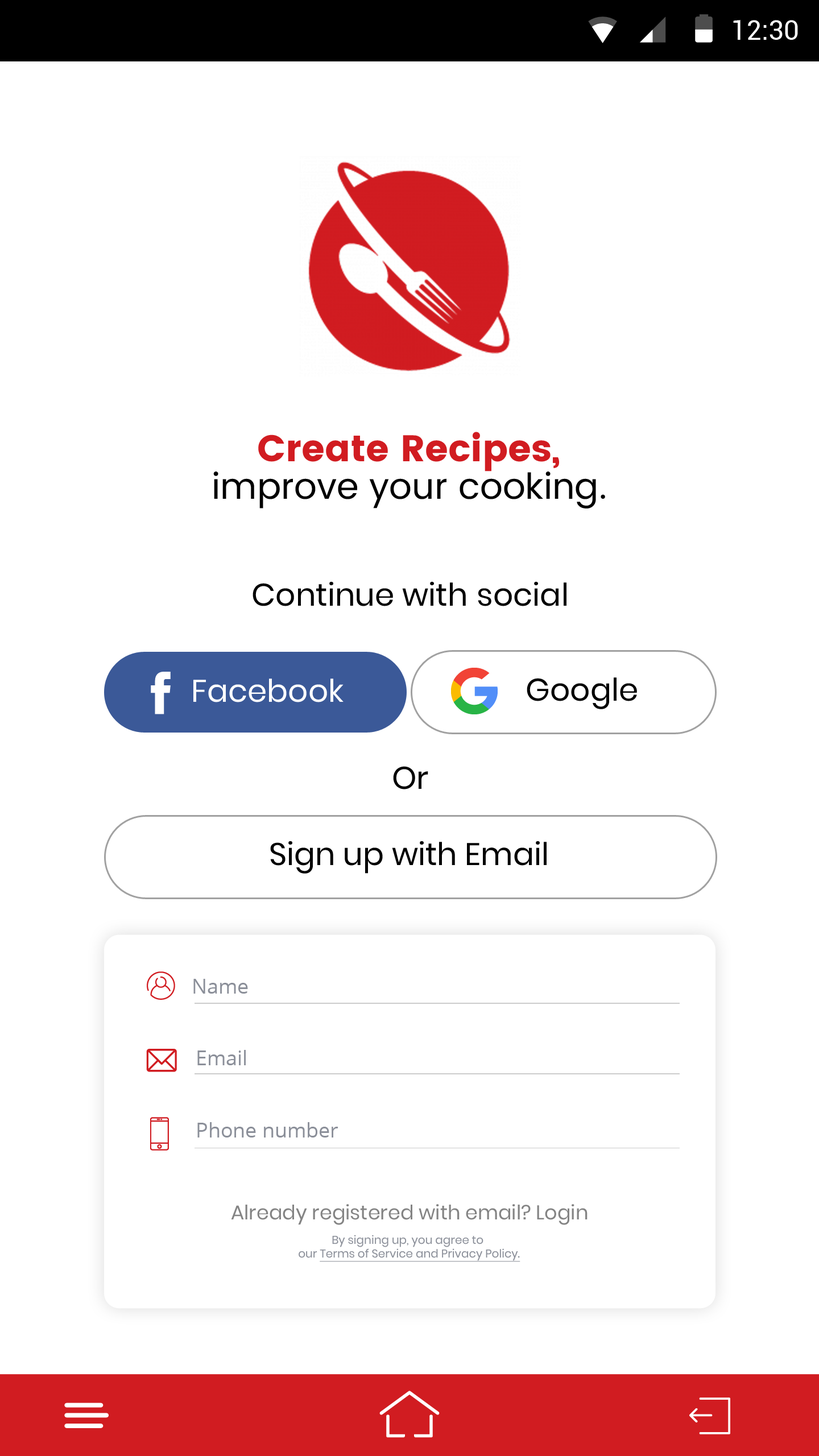
<style>
.page{position:relative;width:819px;height:1456px;background:#ffffff}
.page>*{position:absolute;margin:0}
.t1{font:27.3px "Roboto-Regular";color:#ffffff}
.t2{font:35.8px/37.5px "Poppins-Regular";color:#000000}
.t3{font:37px/37.5px "Poppins";color:#d11c21}
.t4{font:31.3px "Poppins-Regular";color:#000000}
.t5{font:31.3px "Poppins-Regular";color:#ffffff}
.t6{font:20.4px "OpenSans";color:#8b8f99}
.t7{font:19.9px "Poppins-Regular";color:#848484}
.t8{font:11.4px "Poppins-Regular";color:#8b8f99;text-decoration:underline}
.t9{font:11.4px "Poppins-Regular";color:#8b8f99}
</style>
<div class="page">
<p class="t1" style="left:733px;top:20px;width:65px;height:20px">12:30</p>
<p class="t2" style="left:213px;top:432px;width:392px;height:76px;text-align:center"><span class="t3">Create Recipes, <br></span>improve your cooking.</p>
<p class="t4" style="left:253px;top:581px;width:313px;height:25px">Continue with  social</p>
<p class="t4" style="left:527px;top:677px;width:110px;height:32px">Google</p>
<p class="t5" style="left:193px;top:679px;width:151px;height:23px">Facebook</p>
<p class="t4" style="left:393px;top:766px;width:35px;height:23px">Or</p>
<p class="t4" style="left:270px;top:841px;width:277px;height:33px">Sign up with Email</p>
<p class="t6" style="left:193px;top:979px;width:55px;height:15px">Name</p>
<p class="t6" style="left:197px;top:1050px;width:49px;height:15px">Email</p>
<p class="t6" style="left:197px;top:1122px;width:141px;height:15px">Phone number</p>
<p class="t7" style="left:231px;top:1204px;width:357px;height:21px">Already registered with email? Login</p>
<p class="t8" style="left:299px;top:1235px;width:221px;height:27px;text-align:center"><span class="t9">By signing up, you agree to <br>our </span>Terms of Service and Privacy Policy.</p>
</div>
